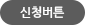
<style>
.page{position:relative;width:85px;height:25px;background:#5c5c5c}
.page>*{position:absolute;margin:0}
.t1{font:12px "NanumGothicBold";letter-spacing:-0.025em;color:#ffffff;text-transform:uppercase}
</style>
<div class="page">
<p class="t1" style="left:20px;top:6px;width:45px;height:12px">신청버튼</p>
</div>
